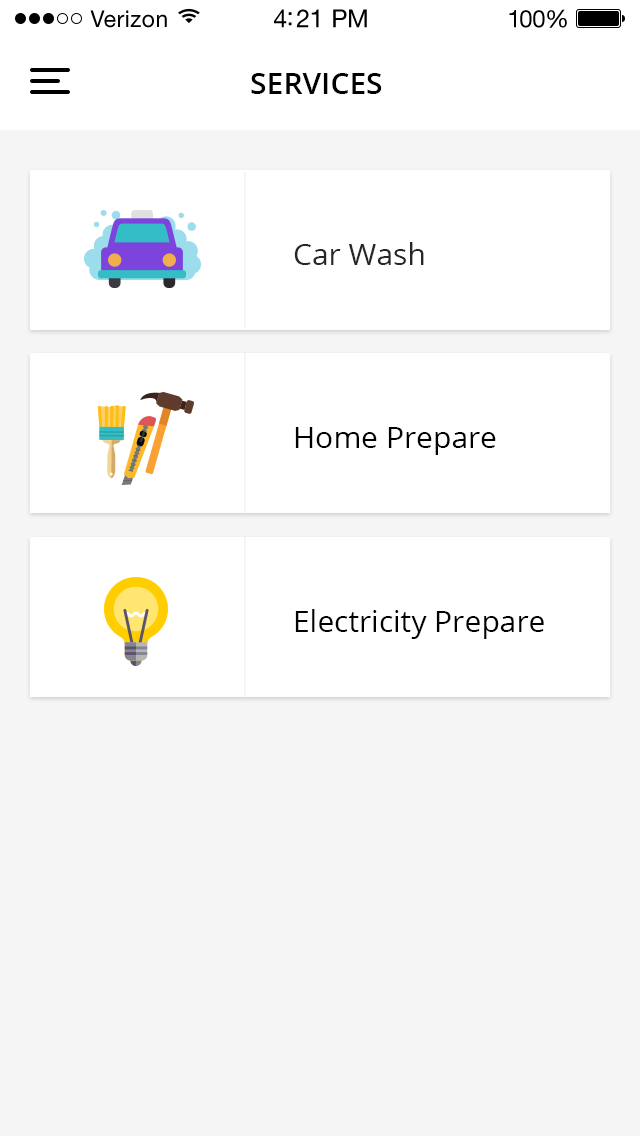
<style>
.page{position:relative;width:640px;height:1136px;background:#f5f5f5}
.page>*{position:absolute;margin:0}
.t1{font:23px "HelveticaNeueLTStd-Roman";letter-spacing:0.02em;color:#010000}
.t2{font:25px "HelveticaNeueLTStd-Roman";letter-spacing:-0.02em;color:#010000}
.t3{font:24px "HelveticaNeueLTStd-Roman";letter-spacing:-0.02em;color:#010000}
.t4{font:30px "OpenSans-Semibold";color:#010000}
.t5{font:30px "OpenSans";color:#272727}
.t6{font:30px "OpenSans";color:#000000}
</style>
<div class="page">
<p class="t1" style="left:90px;top:10px;width:77px;height:18px">Verizon</p>
<p class="t2" style="left:274px;top:9px;width:93px;height:19px">4:21 PM</p>
<p class="t3" style="left:509px;top:9px;width:58px;height:19px">100%</p>
<p class="t4" style="left:251px;top:73px;width:131px;height:21px">SERVICES</p>
<p class="t5" style="left:294px;top:242px;width:130px;height:23px">Car Wash</p>
<p class="t6" style="left:295px;top:427px;width:201px;height:28px">Home Prepare</p>
<p class="t6" style="left:295px;top:609px;width:249px;height:30px">Electricity Prepare</p>
</div>
